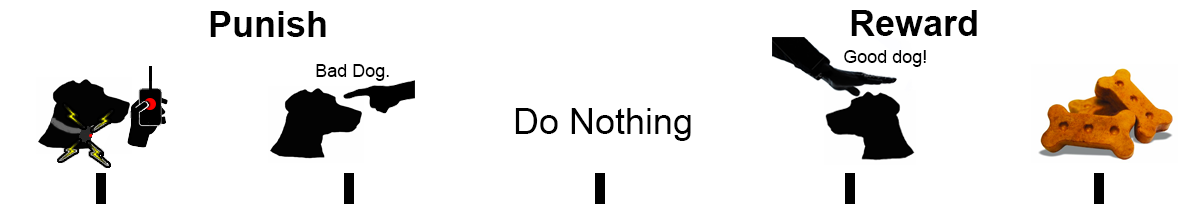
<style>
.page{position:relative;width:1200px;height:204px;background:#ffffff}
.page>*{position:absolute;margin:0}
.t1{font:36px "Arial-BoldMT";color:#000000}
.t2{font:18px "ArialMT";color:#000000}
.t3{font:36px "ArialMT";color:#000000}
</style>
<div class="page">
<p class="t1" style="left:210px;top:11px;width:116px;height:26px">Punish</p>
<p class="t1" style="left:851px;top:10px;width:126px;height:26px">Reward</p>
<p class="t2" style="left:844px;top:50px;width:82px;height:17px">Good dog!</p>
<p class="t2" style="left:316px;top:64px;width:73px;height:17px">Bad Dog.</p>
<p class="t3" style="left:515px;top:108px;width:176px;height:33px">Do Nothing</p>
</div>
